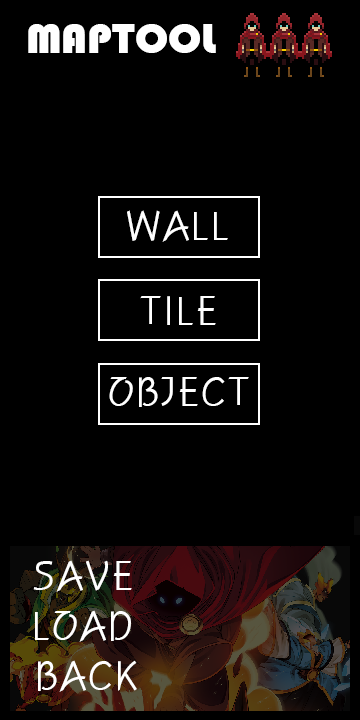
<style>
.page{position:relative;width:360px;height:720px;background:#000000}
.page>*{position:absolute;margin:0}
.t1{font:44px "Bauhaus93";color:#ffffff}
.t2{font:40px "H2porL";color:#ffffff}
</style>
<div class="page">
<p class="t1" style="left:28px;top:24px;width:188px;height:29px">MAPTOOL</p>
<p class="t2" style="left:127px;top:210px;width:101px;height:32px">WALL</p>
<p class="t2" style="left:140px;top:296px;width:76px;height:29px">TILE</p>
<p class="t2" style="left:109px;top:377px;width:140px;height:30px">OBJECT</p>
<p class="t2" style="left:33px;top:560px;width:99px;height:32px">SAVE</p>
<p class="t2" style="left:35px;top:610px;width:96px;height:32px">LOAD</p>
<p class="t2" style="left:38px;top:660px;width:99px;height:32px">BACK</p>
</div>
